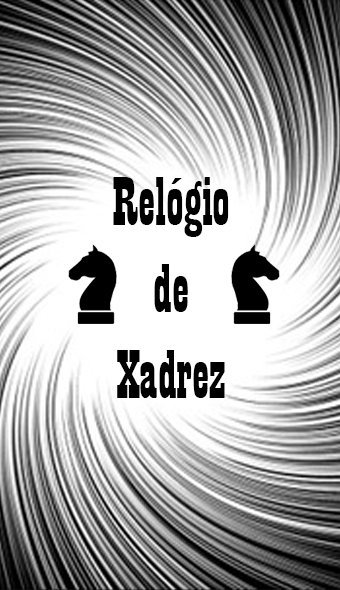
<style>
.page{position:relative;width:340px;height:590px}
.page>*{position:absolute;margin:0}
.t1{font:72.1px "Playbill";color:#000000}
</style>
<div class="page">
<p class="t1" style="left:113px;top:177px;width:116px;height:221px;text-align:center">Relógio <br>de <br>Xadrez</p>
</div>
